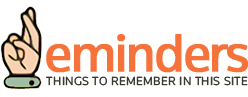
<style>
.page{position:relative;width:248px;height:97px;background:#ffffff}
.page>*{position:absolute;margin:0}
.t1{font:55.5px "Knowledge-Regular";letter-spacing:-0.05em;color:#f5723b;font-weight:bold}
.t2{font:12.2px "Knowledge-Regular";letter-spacing:0.03em;color:#383b31}
</style>
<div class="page">
<p class="t1" style="left:46px;top:34px;width:203px;height:39px">eminders</p>
<p class="t2" style="left:46px;top:76px;width:202px;height:10px">THINGS TO REMEMBER IN THIS SITE</p>
</div>
